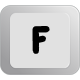
<style>
.page{position:relative;width:80px;height:80px;background:#e1e1e1}
.page>*{position:absolute;margin:0}
.t1{font:50px "WaffleRegular";color:#000000}
</style>
<div class="page">
<p class="t1" style="left:34px;top:28px;width:14px;height:24px">F</p>
</div>
